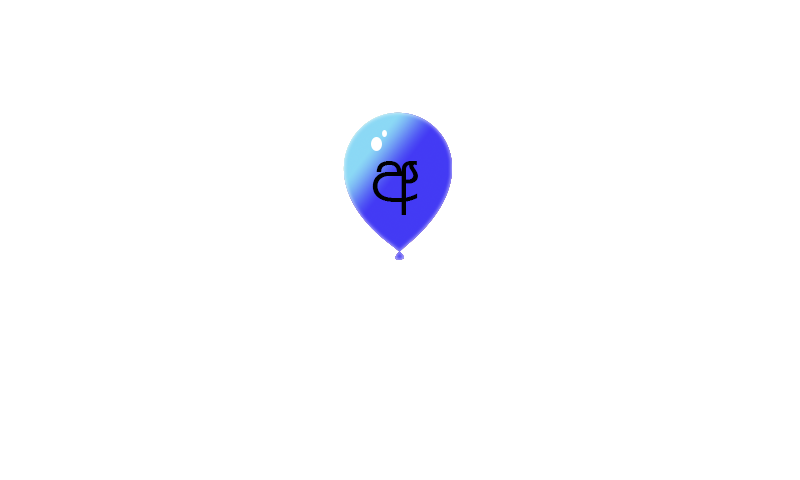
<style>
.page{position:relative;width:800px;height:480px;background:#ffffff}
.page>*{position:absolute;margin:0}
.t1{font:80px "BGGangaLight";color:#000001}
</style>
<div class="page">
<p class="t1" style="left:372px;top:161px;width:46px;height:54px">w</p>
</div>
